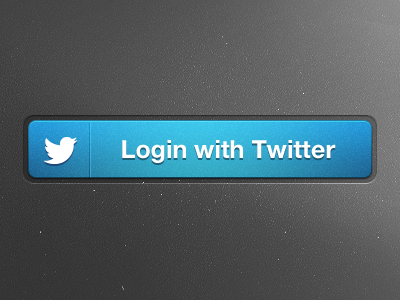
<style>
.page{position:relative;width:400px;height:300px}
.page>*{position:absolute;margin:0}
.t1{font:25px "HelveticaNeue-Bold";color:#ffffff}
</style>
<div class="page">
<p class="t1" style="left:122px;top:140px;width:214px;height:23px">Login with Twitter</p>
</div>
